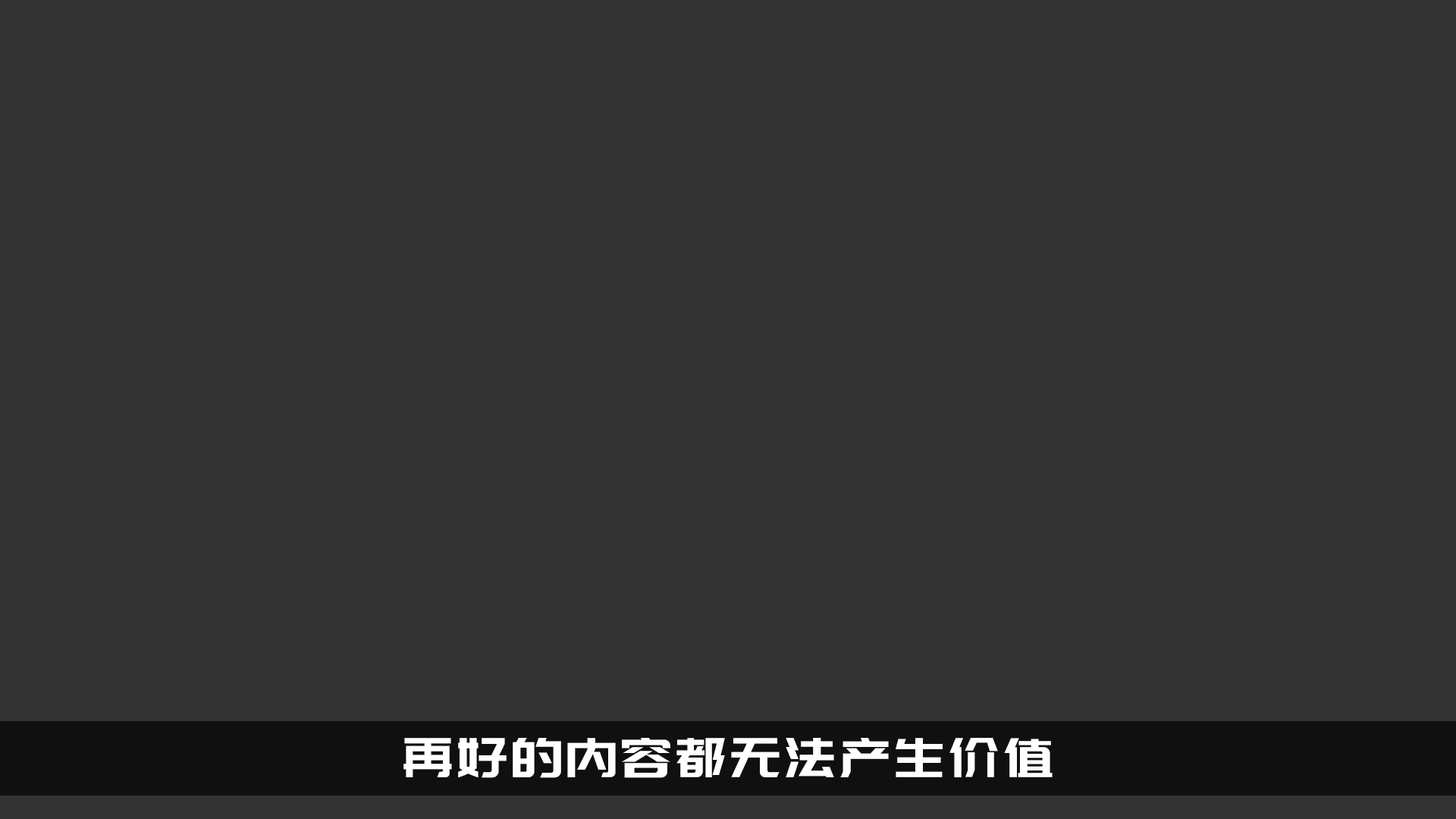
<style>
.page{position:relative;width:1456px;height:819px;background:#333333}
.page>*{position:absolute;margin:0}
.t1{font:54.6px "PangMenZhengDao-3";color:#ffffff}
</style>
<div class="page">
<p class="t1" style="left:403px;top:738px;width:650px;height:40px">再好的内容都无法产生价值</p>
</div>
